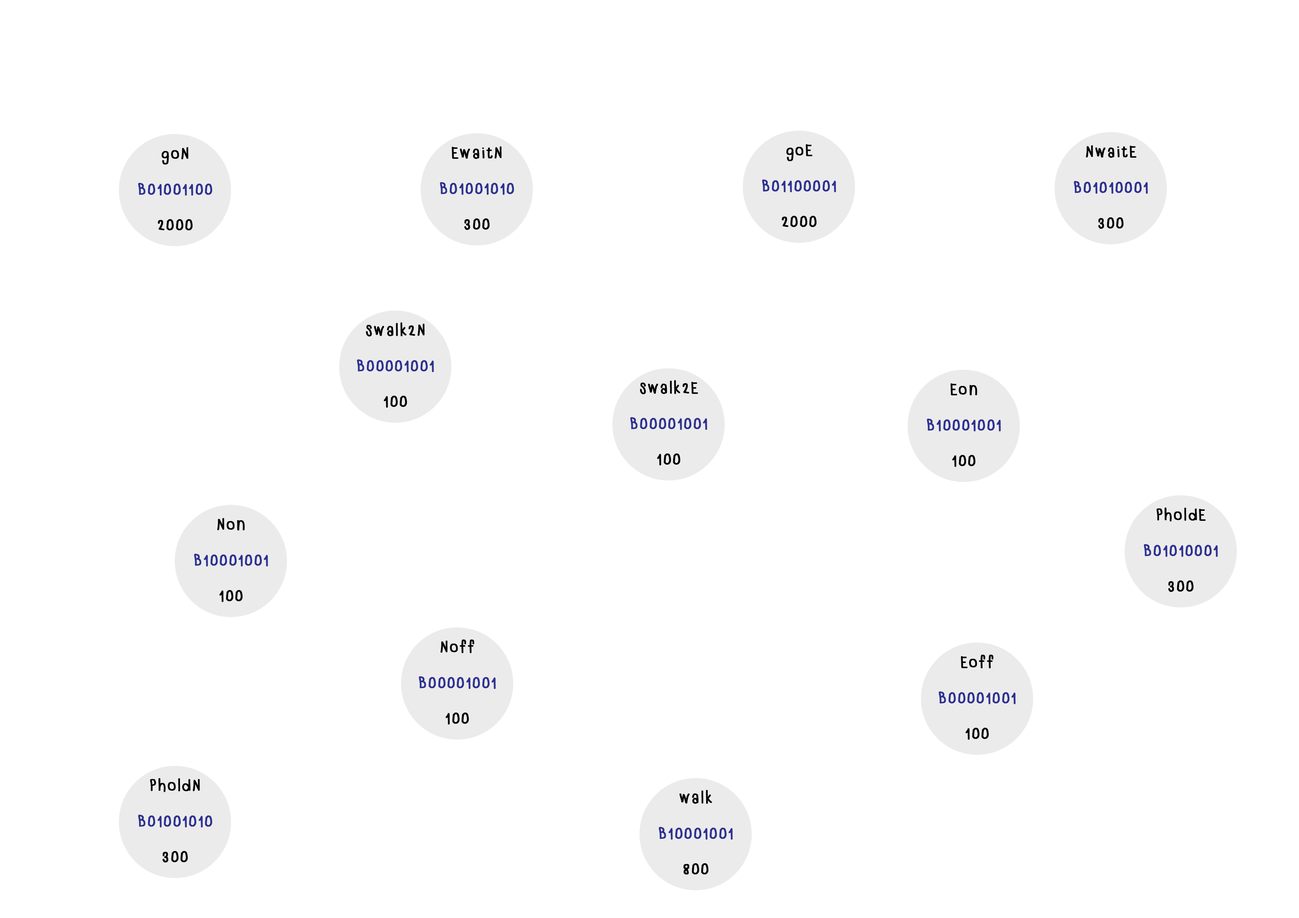
<style>
.page{position:relative;width:1299px;height:918px;background:#ffffff}
.page>*{position:absolute;margin:0}
.t1{font:23.7px/35.5px "5103tLUJIUMJIUM";letter-spacing:0.05em;color:#2e3192;font-weight:bold}
.t2{font:23.7px/35.5px "5103tLUJIUMJIUM";letter-spacing:0.05em;color:#000000;font-weight:bold}
</style>
<div class="page">
<p class="t1" style="left:138px;top:147px;width:74px;height:84px;text-align:center"><span class="t2">goN<br></span>B01001100<br><span class="t2">2000</span></p>
<p class="t1" style="left:440px;top:146px;width:74px;height:84px;text-align:center"><span class="t2">EwaitN<br></span>B01001010<br><span class="t2">300</span></p>
<p class="t1" style="left:762px;top:144px;width:74px;height:83px;text-align:center"><span class="t2">goE<br></span>B01100001<br><span class="t2">2000</span></p>
<p class="t1" style="left:1074px;top:145px;width:74px;height:84px;text-align:center"><span class="t2">NwaitE<br></span>B01010001<br><span class="t2">300</span></p>
<p class="t1" style="left:357px;top:322px;width:77px;height:86px;text-align:center"><span class="t2">swalk2N<br></span>B00001001<br><span class="t2">100</span></p>
<p class="t1" style="left:630px;top:380px;width:77px;height:86px;text-align:center"><span class="t2">swalk2E<br></span>B00001001<br><span class="t2">100</span></p>
<p class="t1" style="left:927px;top:383px;width:74px;height:84px;text-align:center"><span class="t2">Eon<br></span>B10001001<br><span class="t2">100</span></p>
<p class="t1" style="left:1144px;top:508px;width:74px;height:84px;text-align:center"><span class="t2">PholdE<br></span>B01010001<br><span class="t2">300</span></p>
<p class="t1" style="left:194px;top:518px;width:74px;height:84px;text-align:center"><span class="t2">Non<br></span>B10001001<br><span class="t2">100</span></p>
<p class="t1" style="left:419px;top:639px;width:77px;height:86px;text-align:center"><span class="t2">Noff<br></span>B00001001<br><span class="t2">100</span></p>
<p class="t1" style="left:939px;top:655px;width:77px;height:85px;text-align:center"><span class="t2">Eoff<br></span>B00001001<br><span class="t2">100</span></p>
<p class="t1" style="left:138px;top:778px;width:74px;height:85px;text-align:center"><span class="t2">PholdN<br></span>B01001010<br><span class="t2">300</span></p>
<p class="t1" style="left:659px;top:790px;width:74px;height:85px;text-align:center"><span class="t2">walk<br></span>B10001001<br><span class="t2">800</span></p>
</div>
